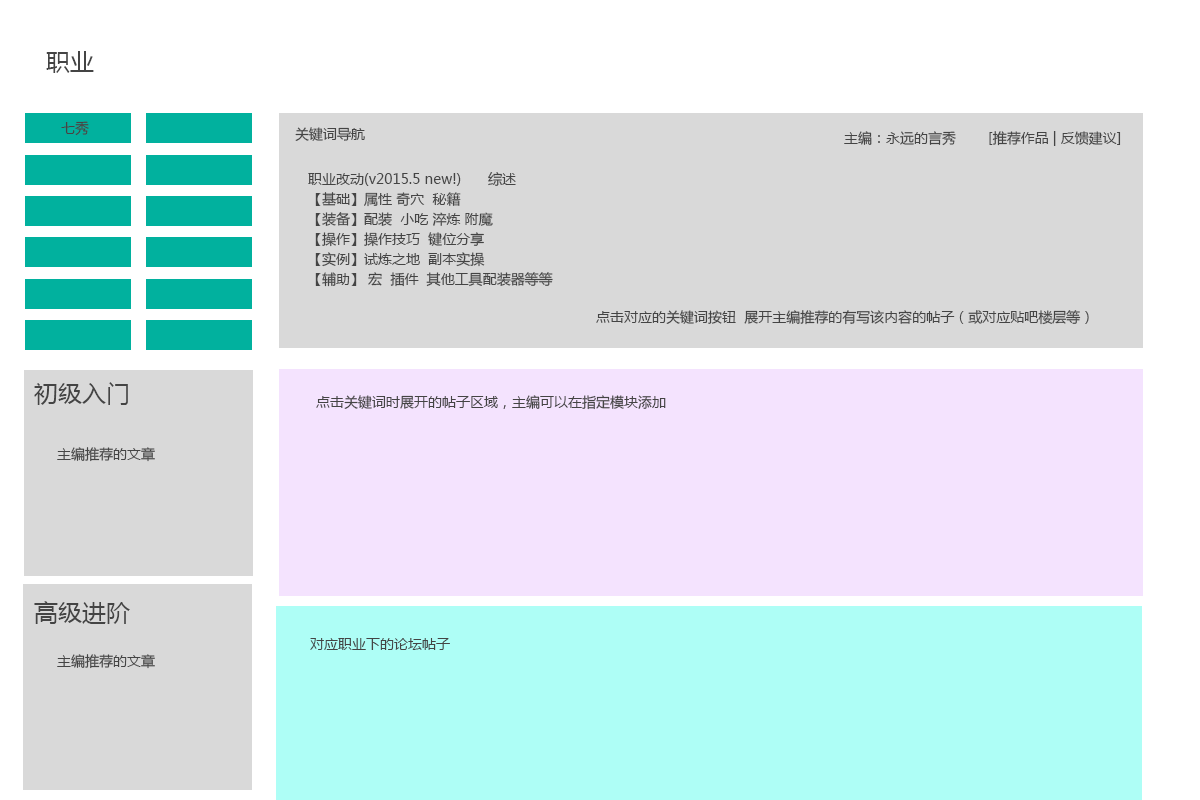
<style>
.page{position:relative;width:1200px;height:800px;background:#d9d9d9}
.page>*{position:absolute;margin:0}
.t1{font:24px "MicrosoftYaHei";color:#444444}
.t2{font:14px "MicrosoftYaHei";color:#444444}
.t3{font:14px/20px "MicrosoftYaHei";color:#444444}
</style>
<div class="page">
<p class="t1" style="left:46px;top:51px;width:48px;height:22px">职业</p>
<p class="t2" style="left:61px;top:121px;width:28px;height:15px">七秀</p>
<p class="t2" style="left:295px;top:127px;width:70px;height:14px">关键词导航</p>
<p class="t2" style="left:844px;top:131px;width:277px;height:15px">主编：永远的言秀 [推荐作品 | 反馈建议]</p>
<p class="t3" style="left:308px;top:172px;width:245px;height:115px">职业改动(v2015.5 new!) 综述 <br>【基础】属性 奇穴  秘籍 <br>【装备】配装  小吃 淬炼 附魔<br>【操作】操作技巧  键位分享   <br>【实例】试炼之地  副本实操 <br>【辅助】 宏  插件  其他工具配装器等等</p>
<p class="t2" style="left:596px;top:310px;width:493px;height:15px">点击对应的关键词按钮  展开主编推荐的有写该内容的帖子（或对应贴吧楼层等）</p>
<p class="t1" style="left:34px;top:382px;width:94px;height:23px">初级入门</p>
<p class="t2" style="left:316px;top:395px;width:350px;height:15px">点击关键词时展开的帖子区域，主编可以在指定模块添加</p>
<p class="t2" style="left:57px;top:447px;width:98px;height:15px">主编推荐的文章</p>
<p class="t1" style="left:34px;top:601px;width:96px;height:23px">高级进阶</p>
<p class="t2" style="left:310px;top:638px;width:140px;height:12px">对应职业下的论坛帖子</p>
<p class="t2" style="left:57px;top:654px;width:98px;height:15px">主编推荐的文章</p>
</div>
